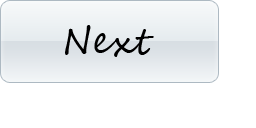
<style>
.page{position:relative;width:256px;height:128px;background:#ffffff}
.page>*{position:absolute;margin:0}
.t1{font:36px "SegoeScript";color:#000000}
</style>
<div class="page">
<p class="t1" style="left:65px;top:25px;width:89px;height:32px">Next</p>
</div>
